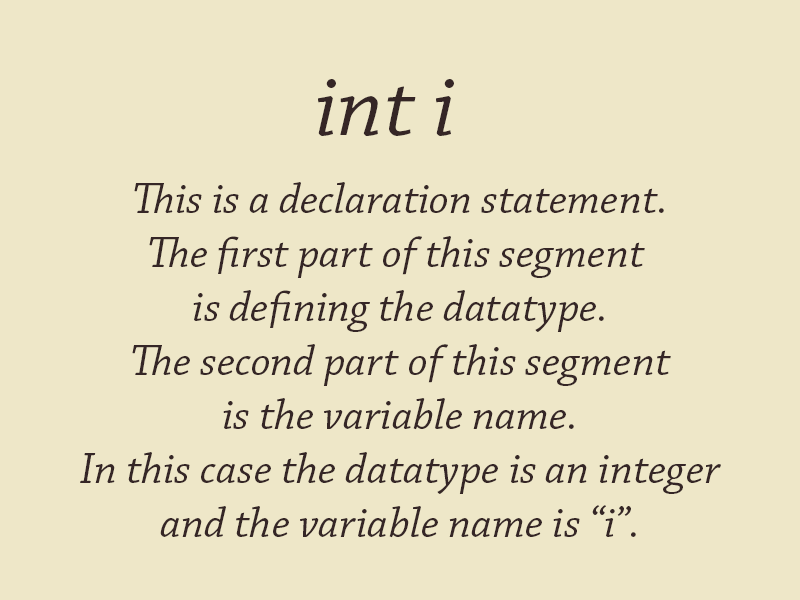
<style>
.page{position:relative;width:800px;height:600px;background:#eee7c8}
.page>*{position:absolute;margin:0}
.t1{font:90px "ChaparralPro-Italic";color:#352626}
.t2{font:45px "ChaparralPro-Italic";color:#352626}
</style>
<div class="page">
<p class="t1" style="left:318px;top:79px;width:136px;height:57px">int i</p>
<p class="t2" style="left:80px;top:182px;width:641px;height:356px;text-align:center">This is a declaration statement.<br>The first part of this segment <br>is defining the datatype.<br>The second part of this segment<br>is the variable name.<br>In this case the datatype is an integer<br>and the variable name is “i”.</p>
</div>
